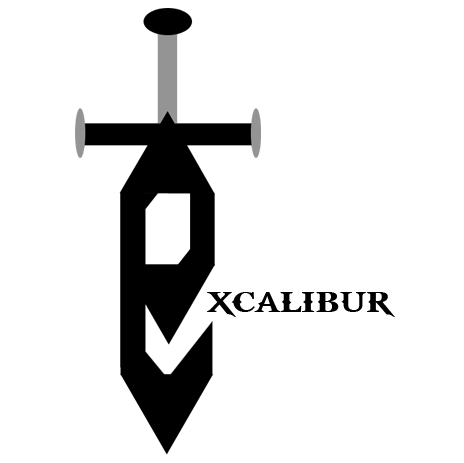
<style>
.page{position:relative;width:464px;height:463px;background:#ffffff}
.page>*{position:absolute;margin:0}
.t1{font:31.8px "GodOfWar";color:#000000}
</style>
<div class="page">
<p class="t1" style="left:207px;top:292px;width:188px;height:25px">XCALIBUR</p>
</div>
